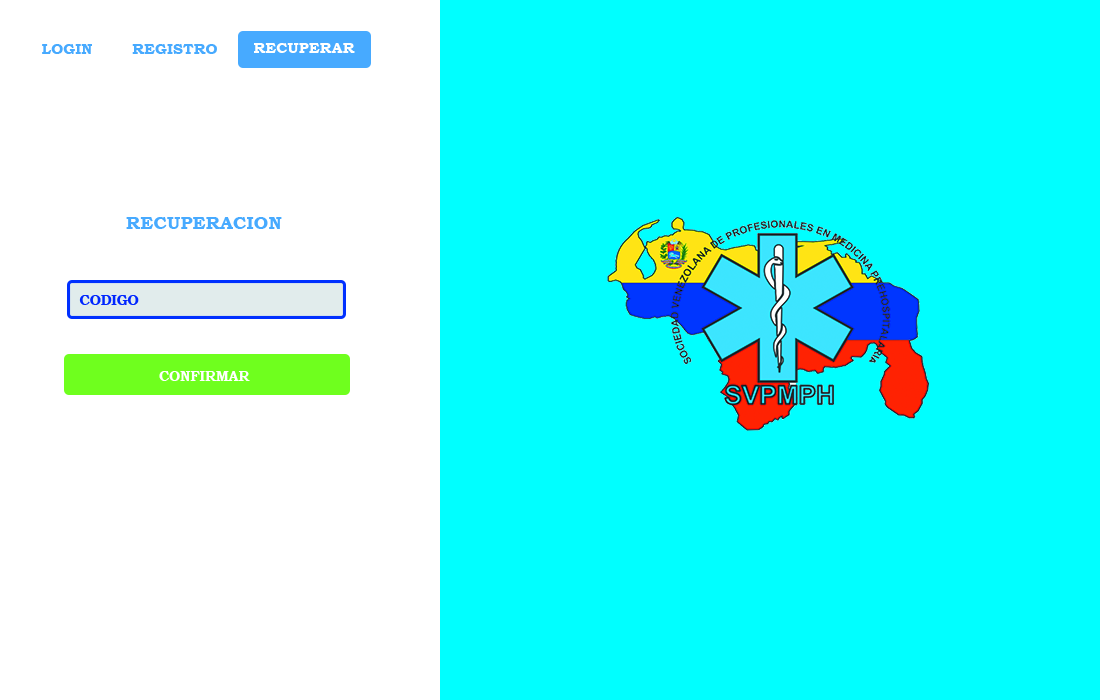
<style>
.page{position:relative;width:1100px;height:700px;background:#00ffff}
.page>*{position:absolute;margin:0}
.t1{font:15.2px "BookmanOldStyle-Bold";color:#47aaff;text-transform:uppercase}
.t2{font:15.2px "BookmanOldStyle-Bold";color:#ffffff;text-transform:uppercase}
.t3{font:18.3px "BookmanOldStyle-Bold";color:#47aaff;text-transform:uppercase}
.t4{font:13.7px "BookmanOldStyle-Bold";color:#0026ff;text-transform:uppercase}
.t5{font:13.7px "BookmanOldStyle-Bold";color:#ffffff;text-transform:uppercase}
</style>
<div class="page">
<p class="t1" style="left:42px;top:44px;width:50px;height:10px">login</p>
<p class="t1" style="left:132px;top:44px;width:85px;height:10px">registro</p>
<p class="t2" style="left:254px;top:43px;width:101px;height:10px">recuperar</p>
<p class="t3" style="left:126px;top:217px;width:156px;height:12px">recuperacion</p>
<p class="t4" style="left:79px;top:295px;width:60px;height:10px">codigo</p>
<p class="t5" style="left:159px;top:371px;width:91px;height:10px">confirmar</p>
</div>
